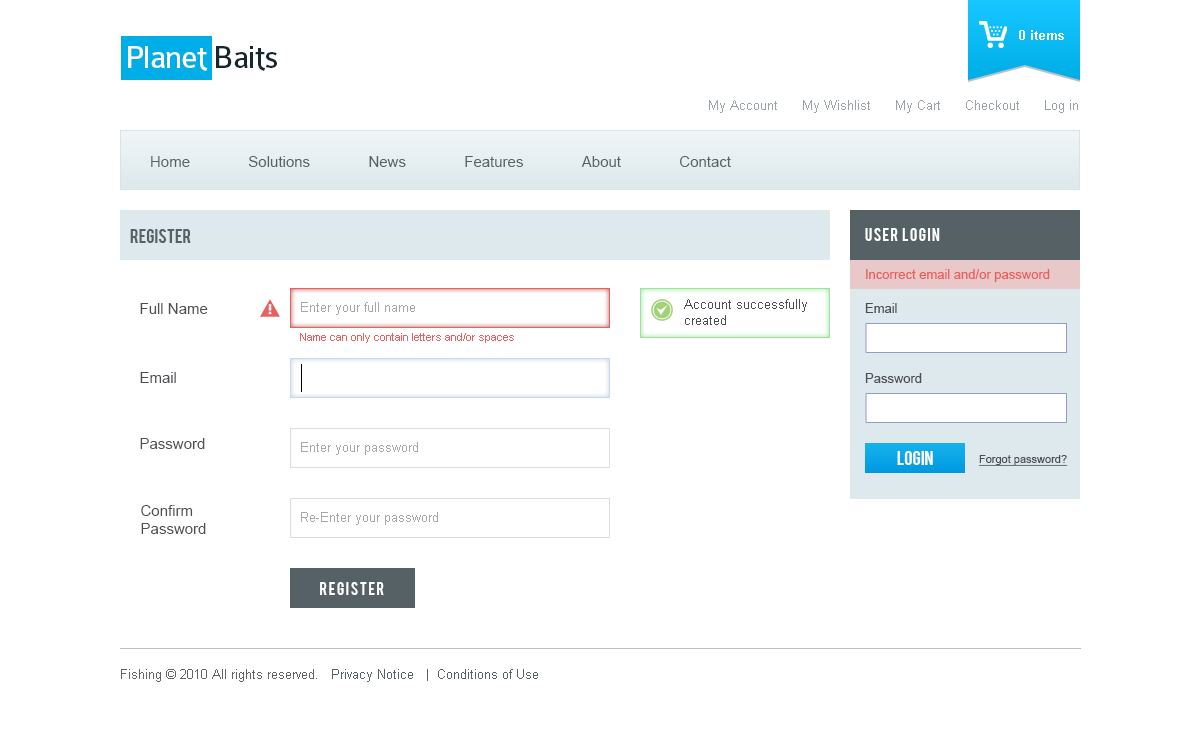
<style>
.page{position:relative;width:1200px;height:729px;background:#ffffff}
.page>*{position:absolute;margin:0}
.t1{font:13px "Arial-BoldMT";color:#ffffff}
.t2{font:34px "Colaborate-Regular";letter-spacing:-0.04em;color:#ffffff}
.t3{font:34px "Colaborate-Regular";letter-spacing:-0.04em;color:#18272c}
.t4{font:13px "ArialMT";color:#99a3a7}
.t5{font:15px "ArialMT";color:#566165}
.t6{font:16px "Bebas";color:#566165}
.t7{font:14px "Bebas";letter-spacing:0.1em;color:#ffffff;text-transform:uppercase}
.t8{font:13px "ArialMT";color:#e95e5e}
.t9{font:15px "ArialMT";color:#4d4e53}
.t10{font:13px "ArialMT";color:#a8a7a7}
.t11{font:13px "ArialMT";color:#4d4e53}
.t12{font:11px "ArialMT";color:#e95e5e}
.t13{font:16px "Bebas";color:#fefefe;text-transform:uppercase}
.t14{font:11px "ArialMT";color:#4d4e53;text-decoration:underline}
.t15{font:14px "Bebas";letter-spacing:0.1em;color:#ffffff}
.t16{font:13px "ArialMT";color:#566165}
.t17{font:13px "ArialMT";color:#636363}
</style>
<div class="page">
<p class="t1" style="left:1019px;top:30px;width:45px;height:10px">0 items</p>
<p class="t2" style="left:128px;top:46px;width:149px;height:25px">Planet <span class="t3">Baits</span></p>
<p class="t4" style="left:709px;top:100px;width:369px;height:13px">My Account      My Wishlist      My Cart      Checkout      Log in</p>
<p class="t5" style="left:151px;top:156px;width:580px;height:11px">Home              Solutions              News              Features              About              Contact</p>
<p class="t6" style="left:130px;top:229px;width:61px;height:14px">register</p>
<p class="t7" style="left:865px;top:228px;width:75px;height:13px">User LOgin</p>
<p class="t8" style="left:866px;top:269px;width:184px;height:13px">Incorrect email and/or password</p>
<p class="t9" style="left:140px;top:303px;width:68px;height:11px">Full Name</p>
<p class="t10" style="left:301px;top:302px;width:114px;height:13px">Enter your full name</p>
<p class="t11" style="left:684px;top:299px;width:123px;height:26px">Account successfully<br>created</p>
<p class="t11" style="left:865px;top:303px;width:32px;height:10px">Email</p>
<p class="t12" style="left:300px;top:333px;width:214px;height:10px">Name can only contain letters and/or spaces</p>
<p class="t9" style="left:140px;top:372px;width:36px;height:11px">Email</p>
<p class="t11" style="left:865px;top:373px;width:57px;height:10px">Password</p>
<p class="t9" style="left:140px;top:438px;width:65px;height:11px">Password</p>
<p class="t10" style="left:301px;top:442px;width:117px;height:13px">Enter your password</p>
<p class="t13" style="left:897px;top:451px;width:36px;height:14px">Login</p>
<p class="t14" style="left:979px;top:455px;width:89px;height:11px">Forgot password?</p>
<p class="t9" style="left:141px;top:505px;width:65px;height:29px">Confirm <br>Password</p>
<p class="t10" style="left:301px;top:512px;width:137px;height:13px">Re-Enter your password</p>
<p class="t15" style="left:320px;top:582px;width:64px;height:13px">register</p>
<p class="t16" style="left:121px;top:669px;width:417px;height:13px"><span class="t17">Fishing © 2010 All rights reserved.   </span>Privacy Notice   |  Conditions of Use</p>
</div>
